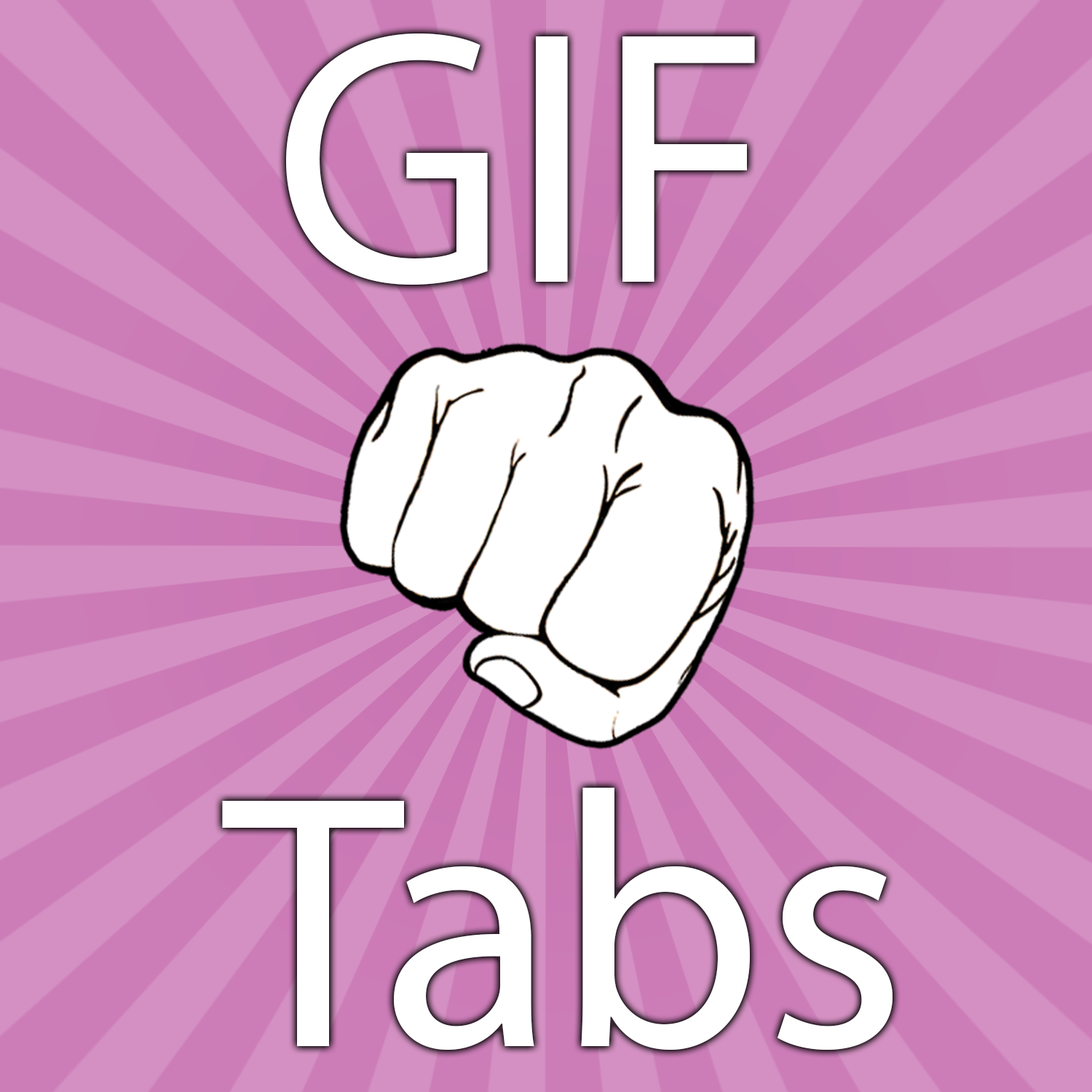
<style>
.page{position:relative;width:1092px;height:1092px;background:#d490c2}
.page>*{position:absolute;margin:0}
.t1{font:364px "MyriadPro-Regular";color:#ffffff}
</style>
<div class="page">
<p class="t1" style="left:286px;top:33px;width:469px;height:252px">GIF</p>
<p class="t1" style="left:222px;top:788px;width:671px;height:262px">Tabs</p>
</div>
